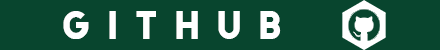
<style>
.page{position:relative;width:440px;height:50px;background:#08452e}
.page>*{position:absolute;margin:0}
.t1{font:37.5px "TheNextFont";letter-spacing:0.48em;color:#ffffff}
</style>
<div class="page">
<p class="t1" style="left:63px;top:11px;width:218px;height:28px">GITHUB</p>
</div>
